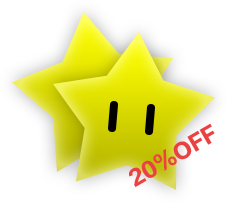
<style>
.page{position:relative;width:228px;height:203px;background:#ffffff}
.page>*{position:absolute;margin:0}
.t1{font:20px "FZLTTHK--GBK1-0";color:#eb4141}
</style>
<div class="page">
<p class="t1" style="left:129px;top:123px;width:86px;height:64px;rotate:-30deg">20%OFF</p>
</div>
